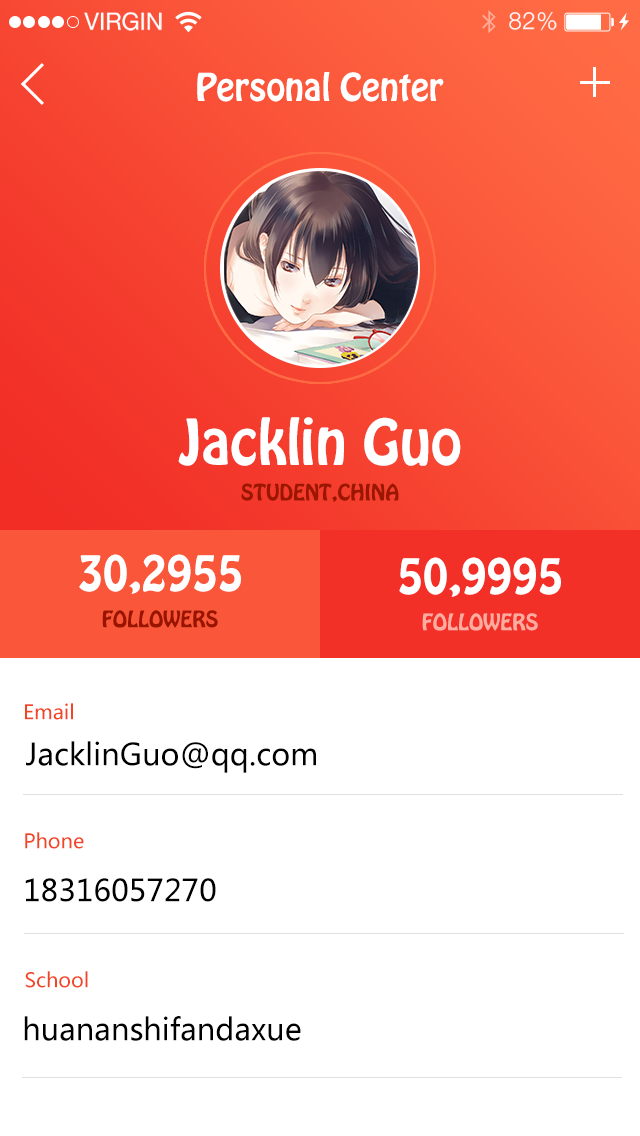
<style>
.page{position:relative;width:640px;height:1136px;background:#ffffff}
.page>*{position:absolute;margin:0}
.t1{font:23.9px "HelveticaNeue";color:#ffffff;text-transform:uppercase}
.t2{font:23.9px "HelveticaNeue-Light";letter-spacing:0.025em;color:#ffffff}
.t3{font:34px "HoboStd";color:#ffffff}
.t4{font:56px "HoboStd";color:#ffffff}
.t5{font:20px "HoboStd";color:#9a1600}
.t6{font:44px "HoboStd";color:#ffffff}
.t7{font:20px "HoboStd";color:#991400}
.t8{font:20px "HoboStd";color:#ffaca0}
.t9{font:20px "MicrosoftYaHei";color:#f14525}
.t10{font:30px "MicrosoftYaHei";color:#000000}
</style>
<div class="page">
<p class="t1" style="left:84px;top:12px;width:78px;height:19px">Virgin</p>
<p class="t2" style="left:509px;top:12px;width:48px;height:19px">82%</p>
<p class="t3" style="left:197px;top:72px;width:247px;height:30px">Personal Center</p>
<p class="t4" style="left:178px;top:417px;width:283px;height:49px">Jacklin Guo</p>
<p class="t5" style="left:241px;top:483px;width:158px;height:19px">STUDENT,CHINA</p>
<p class="t6" style="left:79px;top:554px;width:162px;height:40px">30,2955</p>
<p class="t6" style="left:399px;top:557px;width:162px;height:40px">50,9995</p>
<p class="t7" style="left:102px;top:610px;width:116px;height:18px">FOLLOWERS</p>
<p class="t8" style="left:422px;top:613px;width:116px;height:18px">FOLLOWERS</p>
<p class="t9" style="left:25px;top:703px;width:48px;height:17px">Email</p>
<p class="t10" style="left:26px;top:741px;width:290px;height:32px">JacklinGuo@qq.com</p>
<p class="t9" style="left:25px;top:832px;width:59px;height:17px">Phone</p>
<p class="t10" style="left:25px;top:878px;width:191px;height:24px">18316057270</p>
<p class="t9" style="left:25px;top:971px;width:63px;height:17px">School</p>
<p class="t10" style="left:24px;top:1016px;width:277px;height:25px">huananshifandaxue</p>
</div>
